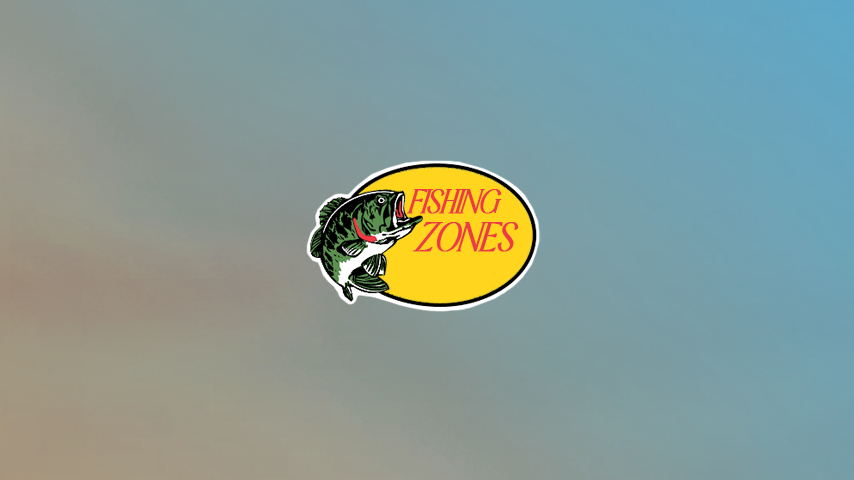
<style>
.page{position:relative;width:854px;height:480px}
.page>*{position:absolute;margin:0}
.t1{font:35.8px "HackyLightDemo-Light";color:#ee3a43;font-weight:bold}
.t2{font:42.9px "HackyLightDemo-Light";color:#ffd51d;font-weight:bold}
.t3{font:42.9px "HackyLightDemo-Light";color:#ee3a43;font-weight:bold}
</style>
<div class="page">
<p class="t1" style="left:378px;top:189px;width:141px;height:63px">FISHING           <span class="t2">h   </span><span class="t3">ZONES</span></p>
</div>
